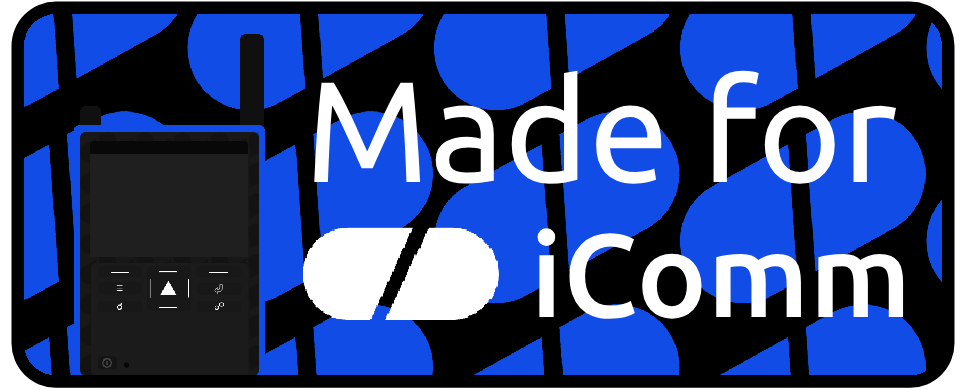
<style>
.page{position:relative;width:970px;height:390px;background:#000000}
.page>*{position:absolute;margin:0}
.t1{font:143.4px "Ubuntu-Regular";color:#ffffff}
.t2{font:118.1px "Ubuntu-Medium";color:#ffffff}
</style>
<div class="page">
<p class="t1" style="left:314px;top:70px;width:582px;height:114px">Made for</p>
<p class="t2" style="left:537px;top:228px;width:367px;height:91px">iComm</p>
</div>
